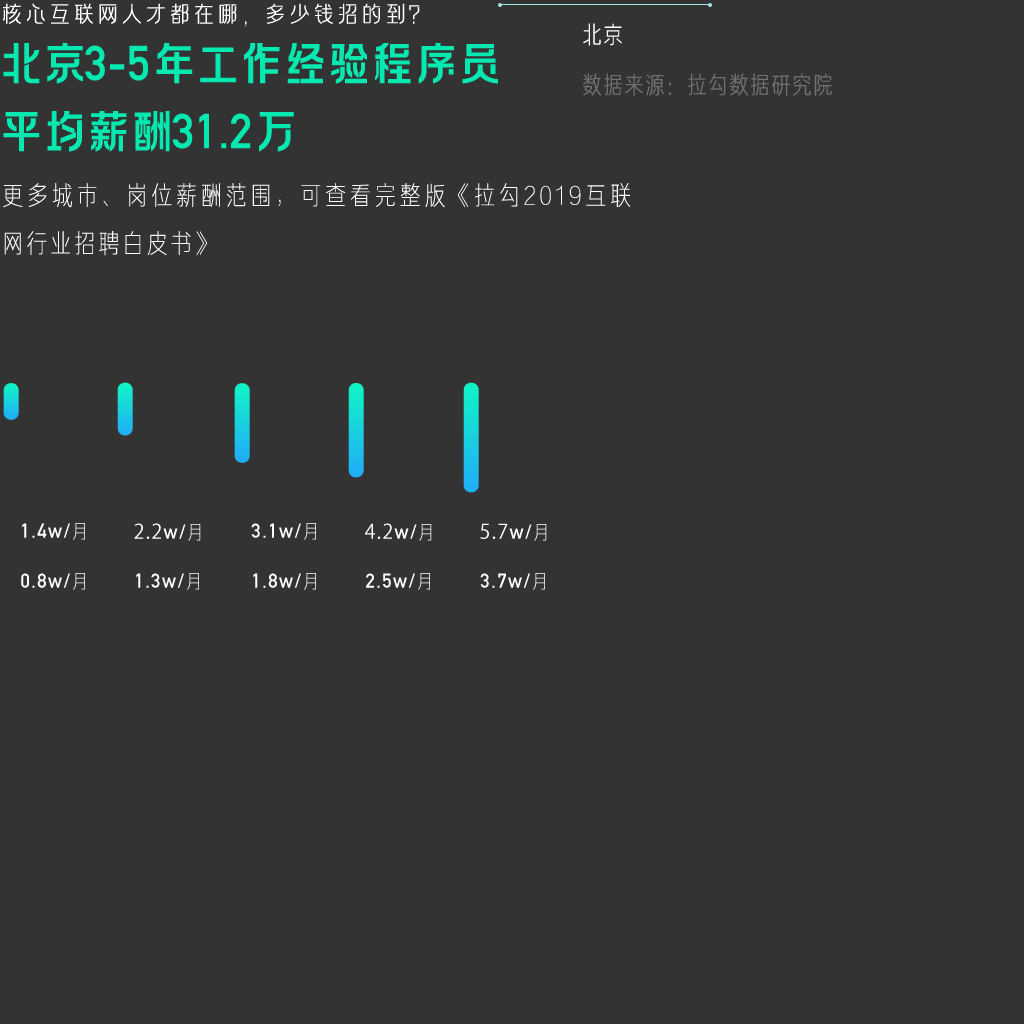
<style>
.page{position:relative;width:1024px;height:1024px;background:#333333}
.page>*{position:absolute;margin:0}
.t1{font:24px "FZLAGBTTS_XI--GB1-0";color:#ffffff;text-transform:uppercase}
.t2{font:24px "FZJUNH_XIJW--GB1-0";letter-spacing:0.05em;color:#ffffff;text-transform:uppercase}
.t3{font:48px/34px "FZLAGBTTS_ZHONG--GB1-0";letter-spacing:-0.09em;color:#05e9b1;text-transform:uppercase}
.t4{font:48px/34px "DINAlternate-Bold";color:#05e9b1;text-transform:uppercase}
.t5{font:24px "FZJUNH_XIJW--GB1-0";letter-spacing:0.05em;color:#717171;text-transform:uppercase}
.t6{font:26px/48px "FZJUNH_XIANJW--GB1-0";letter-spacing:0.1em;color:#ffffff}
.t7{font:20px "DINAlternate-Bold";letter-spacing:0.06em;color:#ffffff}
.t8{font:20px "FZJUNH_XIJW--GB1-0";letter-spacing:0.06em;color:#ffffff}
.t9{font:20px "KozGoPr6N-Regular";letter-spacing:0.06em;color:#ffffff}
</style>
<div class="page">
<p class="t1" style="left:3px;top:3px;width:417px;height:24px">核心互联网人才都在哪，多少钱招的到？</p>
<p class="t2" style="left:583px;top:23px;width:39px;height:23px">北京</p>
<p class="t3" style="left:3px;top:43px;width:495px;height:109px">北京<span class="t4">3-5</span>年工作经验程序员<br><br>平均薪酬<span class="t4">31.2</span>万</p>
<p class="t5" style="left:583px;top:73px;width:249px;height:23px">数据来源：拉勾数据研究院</p>
<p class="t6" style="left:3px;top:183px;width:628px;height:73px;text-align:justify">更多城市、岗位薪酬范围，可查看完整版《拉勾2019互联网行业招聘白皮书》</p>
<p class="t7" style="left:22px;top:523px;width:63px;height:17px">1.4w/<span class="t8">月</span></p>
<p class="t9" style="left:134px;top:523px;width:67px;height:18px">2.2<span class="t7">w/</span><span class="t8">月</span></p>
<p class="t7" style="left:251px;top:523px;width:65px;height:17px">3.1w/<span class="t8">月</span></p>
<p class="t9" style="left:365px;top:523px;width:67px;height:18px">4.2<span class="t7">w/</span><span class="t8">月</span></p>
<p class="t9" style="left:480px;top:523px;width:67px;height:18px">5.7<span class="t7">w/</span><span class="t8">月</span></p>
<p class="t7" style="left:21px;top:573px;width:64px;height:17px">0.8w/<span class="t8">月</span></p>
<p class="t7" style="left:136px;top:573px;width:63px;height:17px">1.3w/<span class="t8">月</span></p>
<p class="t7" style="left:253px;top:573px;width:63px;height:17px">1.8w/<span class="t8">月</span></p>
<p class="t7" style="left:366px;top:573px;width:64px;height:17px">2.5w/<span class="t8">月</span></p>
<p class="t7" style="left:480px;top:573px;width:65px;height:17px">3.7w/<span class="t8">月</span></p>
</div>
